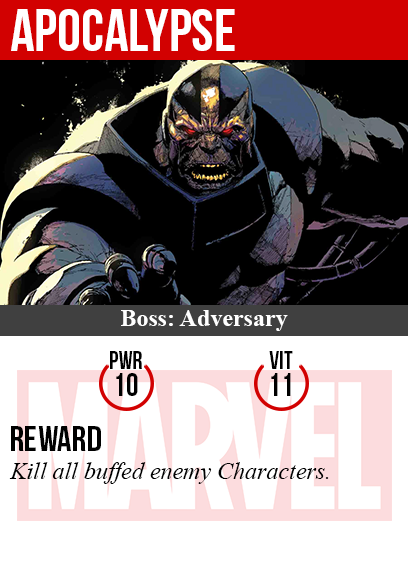
<style>
.page{position:relative;width:408px;height:585px;background:#ffffff}
.page>*{position:absolute;margin:0}
.t1{font:60px "BebasNeue";color:#ffffff}
.t2{font:24px "TimesNewRomanPS-BoldMT";color:#ffffff}
.t3{font:25px "BebasNeue";color:#000000}
.t4{font:32px "BebasNeue";color:#000000}
.t5{font:36px "BebasNeue";color:#000000}
.t6{font:24px "TimesNewRomanPS-ItalicMT";color:#000000}
</style>
<div class="page">
<p class="t1" style="left:11px;top:9px;width:224px;height:42px">apocalypse</p>
<p class="t2" style="left:121px;top:310px;width:167px;height:21px">Boss: Adversary</p>
<p class="t3" style="left:110px;top:351px;width:32px;height:18px">pwr</p>
<p class="t3" style="left:269px;top:351px;width:24px;height:18px">vit</p>
<p class="t4" style="left:116px;top:373px;width:22px;height:23px">10</p>
<p class="t4" style="left:271px;top:373px;width:20px;height:23px">11</p>
<p class="t5" style="left:11px;top:426px;width:90px;height:25px">reward</p>
<p class="t6" style="left:9px;top:462px;width:320px;height:22px">Kill all buffed enemy Characters.</p>
</div>
